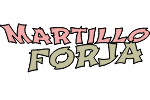
<style>
.page{position:relative;width:150px;height:100px;background:#ffffff}
.page>*{position:absolute;margin:0}
.t1{font:24px "Shojumaru-Regular"}
.t2{font:28.2px "Shojumaru-Regular"}
</style>
<div class="page">
<p class="t1" style="left:0px;top:22px;width:151px;height:24px">Martillo</p>
<p class="t2" style="left:27px;top:39px;width:117px;height:34px;rotate:-5deg">FORJA</p>
</div>
